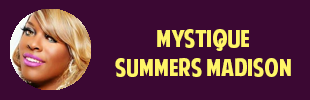
<style>
.page{position:relative;width:310px;height:100px;background:#3b0833}
.page>*{position:absolute;margin:0}
.t1{font:24px "AmericanPurpose";color:#fff568}
.t2{font:24px "Tahoma";color:#ffffff}
</style>
<div class="page">
<p class="t1" style="left:115px;top:29px;width:176px;height:48px;text-align:center"><span class="t2"><br></span>Mystique <br>Summers Madison</p>
</div>
